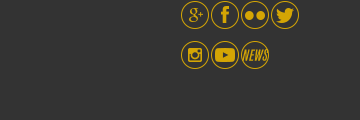
<style>
.page{position:relative;width:360px;height:120px;background:#333333}
.page>*{position:absolute;margin:0}
.t1{font:16px "AkzidenzGrotConBQ-MediumItalic";color:#d4a504;text-transform:uppercase}
</style>
<div class="page">
<p class="t1" style="left:242px;top:49px;width:27px;height:12px">news</p>
</div>
